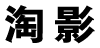
<style>
.page{position:relative;width:100px;height:48px;background:#ffffff}
.page>*{position:absolute;margin:0}
.t1{font:42px "FZYDCHJW--GB1-0";letter-spacing:0.38em;color:#000000}
</style>
<div class="page">
<p class="t1" style="left:5px;top:5px;width:90px;height:39px">淘影</p>
</div>
